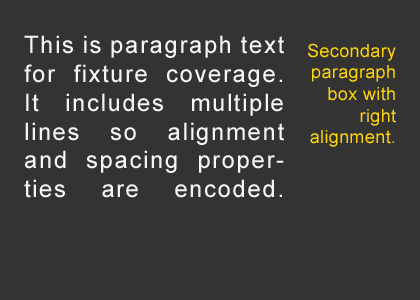
<style>
.page{position:relative;width:420px;height:300px;background:#333333}
.page>*{position:absolute;margin:0}
.t1{font:24px "ArialMT";letter-spacing:0.065em;color:#f5f5f5}
.t2{font:18px "ArialMT";letter-spacing:0.02em;color:#ffd60a}
</style>
<div class="page">
<p class="t1" style="left:24px;top:35px;width:260px;height:163px;text-align:justify">This is paragraph text for fixture coverage. It includes multiple lines so alignment and spacing properties are encoded.</p>
<p class="t2" style="left:308px;top:43px;width:88px;height:104px;text-align:right">Secondary paragraph box with right alignment.</p>
</div>
